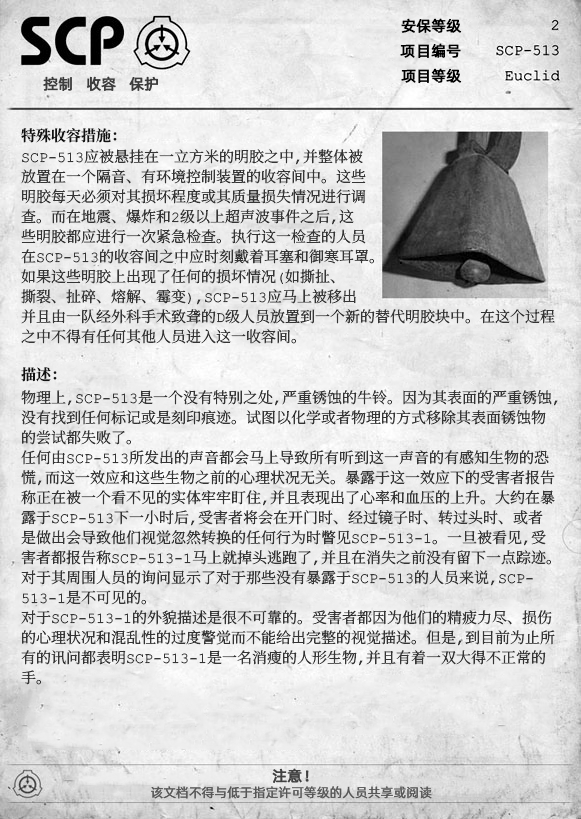
<style>
.page{position:relative;width:581px;height:819px}
.page>*{position:absolute;margin:0}
.t1{font:15px "AlibabaPuHuiTiR";color:#000000;font-weight:bold}
.t2{font:15px "AlibabaPuHuiTiR";color:#3d3d3d;font-weight:bold}
.t3{font:15px "ContainmentBreach-Bold";color:#121212}
.t4{font:15px/20px "ContainmentBreach-Regular";color:#353535}
.t5{font:15px "AlibabaPuHuiTiR";color:#414141;font-weight:bold}
.t6{font:13px "AlibabaPuHuiTiR";color:#575757}
</style>
<div class="page">
<p class="t1" style="left:401px;top:18px;width:61px;height:15px">安保等级</p>
<p class="t1" style="left:400px;top:43px;width:61px;height:15px">项目编号</p>
<p class="t2" style="left:43px;top:76px;width:115px;height:15px">控制   收容   保护</p>
<p class="t1" style="left:401px;top:68px;width:61px;height:15px">项目等级</p>
<p class="t3" style="left:21px;top:128px;width:96px;height:15px">特殊收容措施：</p>
<p class="t4" style="left:21px;top:149px;width:534px;height:195px">SCP-513应被悬挂在一立方米的明胶之中，并整体被<br>放置在一个隔音、有环境控制装置的收容间中。这些<br>明胶每天必须对其损坏程度或其质量损失情况进行调<br>查。而在地震、爆炸和2级以上超声波事件之后，这<br>些明胶都应进行一次紧急检查。执行这一检查的人员<br>在SCP-513的收容间之中应时刻戴着耳塞和御寒耳罩。<br>如果这些明胶上出现了任何的损坏情况（如撕扯、<br>撕裂、扯碎、熔解、霉变），SCP-513应马上被移出<br>并且由一队经外科手术致聋的D级人员放置到一个新的替代明胶块中。在这个过程<br>之中不得有任何其他人员进入这一收容间。</p>
<p class="t3" style="left:21px;top:367px;width:36px;height:15px">描述：</p>
<p class="t4" style="left:21px;top:390px;width:537px;height:295px">物理上，SCP-513是一个没有特别之处，严重锈蚀的牛铃。因为其表面的严重锈蚀，<br>没有找到任何标记或是刻印痕迹。试图以化学或者物理的方式移除其表面锈蚀物<br>的尝试都失败了。<br>任何由SCP-513所发出的声音都会马上导致所有听到这一声音的有感知生物的恐<br>慌，而这一效应和这些生物之前的心理状况无关。暴露于这一效应下的受害者报告<br>称正在被一个看不见的实体牢牢盯住，并且表现出了心率和血压的上升。大约在暴<br>露于SCP-513下一小时后，受害者将会在开门时、经过镜子时、转过头时、或者<br>是做出会导致他们视觉忽然转换的任何行为时瞥见SCP-513-1。一旦被看见，受<br>害者都报告称SCP-513-1马上就掉头逃跑了，并且在消失之前没有留下一点踪迹。<br>对于其周围人员的询问显示了对于那些没有暴露于SCP-513的人员来说，SCP-<br>513-1是不可见的。<br>对于SCP-513-1的外貌描述是很不可靠的。受害者都因为他们的精疲力尽、损伤<br>的心理状况和混乱性的过度警觉而不能给出完整的视觉描述。但是，到目前为止所<br>有的讯问都表明SCP-513-1是一名消瘦的人形生物，并且有着一双大得不正常的<br>手。</p>
<p class="t5" style="left:272px;top:768px;width:37px;height:15px">注意！</p>
<p class="t6" style="left:151px;top:786px;width:281px;height:13px">该文档不得与低于指定许可等级的人员共享或阅读</p>
</div>
